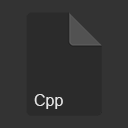
<style>
.page{position:relative;width:128px;height:128px;background:#333333}
.page>*{position:absolute;margin:0}
.t1{font:16px "ArialMT";color:#e6e6e6}
</style>
<div class="page">
<p class="t1" style="left:34px;top:94px;width:29px;height:15px">Cpp</p>
</div>
